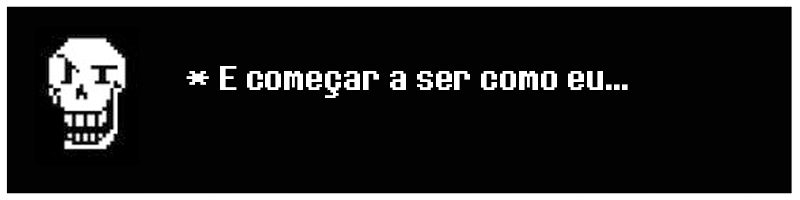
<style>
.page{position:relative;width:800px;height:200px;background:#020202}
.page>*{position:absolute;margin:0}
.t1{font:36px "DeterminationSans";color:#ffffff}
</style>
<div class="page">
<p class="t1" style="left:186px;top:66px;width:442px;height:32px">* E começar a ser como eu...</p>
</div>
